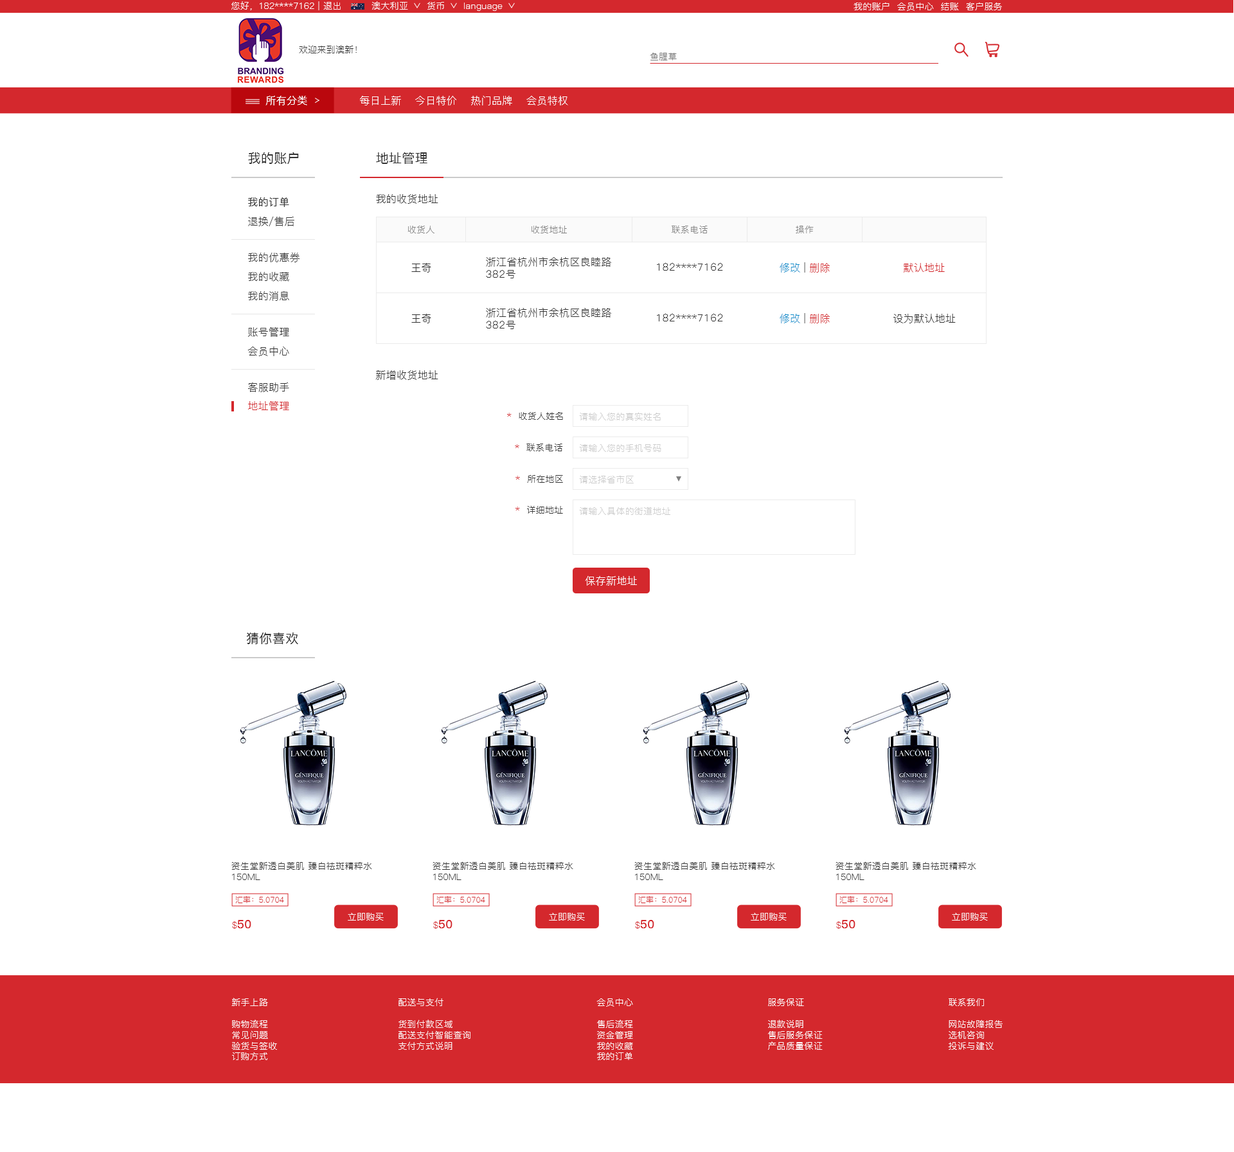
<style>
.page{position:relative;width:1234px;height:1152px;background:#ffffff}
.page>*{position:absolute;margin:0}
.t1{font:9px "PingFang-SC-Regular";letter-spacing:0.02em;color:#ffffff}
.t2{font:9px "PingFang-SC-Regular";letter-spacing:0.02em;color:#333333}
.t3{font:9px "PingFang-SC-Regular";letter-spacing:0.02em;color:#767676}
.t4{font:10.3px "PingFang-SC-Medium";letter-spacing:0.02em;color:#ffffff}
.t5{font:10.3px "PingFang-SC-Regular";letter-spacing:0.02em;color:#ffffff}
.t6{font:12.9px "PingFang-SC-Medium";letter-spacing:0.02em;color:#333333}
.t7{font:10.3px "PingFang-SC-Medium";letter-spacing:0.02em;color:#333333}
.t8{font:10.3px "PingFang-SC-Regular";letter-spacing:0.02em;color:#343434}
.t9{font:9px "PingFang-SC-Regular";letter-spacing:0.02em;color:#808080}
.t10{font:10.3px "PingFang-SC-Regular";letter-spacing:0.02em;color:#333333}
.t11{font:10.3px "PingFang-SC-Regular";letter-spacing:0.02em;color:#148fcc}
.t12{font:10.3px "PingFang-SC-Regular";letter-spacing:0.02em;color:#d4282d}
.t13{font:9px "PingFang-SC-Regular";letter-spacing:0.02em;color:#343434}
.t14{font:9px "PingFang-SC-Regular";letter-spacing:0.02em;color:#d4282d}
.t15{font:9px "PingFang-SC-Regular";letter-spacing:0.02em;color:#cccccc}
.t16{font:7.7px "PingFang-SC-Regular";letter-spacing:0.02em;color:#d4282d}
.t17{font:11.6px "PingFang-SC-Bold";letter-spacing:0.02em;color:#d4282d}
.t18{font:9px "PingFang-SC-Regular";letter-spacing:0.02em;color:#fffefe}
</style>
<div class="page">
<p class="t1" style="left:231px;top:1px;width:110px;height:9px">您好，182****7162 | 退出</p>
<p class="t1" style="left:372px;top:1px;width:36px;height:9px">澳大利亚</p>
<p class="t1" style="left:427px;top:2px;width:17px;height:8px">货币</p>
<p class="t1" style="left:464px;top:3px;width:39px;height:8px">language</p>
<p class="t1" style="left:854px;top:2px;width:148px;height:9px">我的账户  会员中心  结账  客户服务</p>
<p class="t2" style="left:299px;top:45px;width:58px;height:8px">欢迎来到澳新！</p>
<p class="t3" style="left:650px;top:53px;width:27px;height:7px">鱼腥草</p>
<p class="t4" style="left:266px;top:96px;width:41px;height:9px">所有分类</p>
<p class="t5" style="left:360px;top:96px;width:208px;height:9px">每日上新    今日特价    热门品牌    会员特权</p>
<p class="t6" style="left:248px;top:152px;width:51px;height:12px">我的账户</p>
<p class="t6" style="left:376px;top:152px;width:52px;height:12px">地址管理</p>
<p class="t7" style="left:248px;top:197px;width:41px;height:10px">我的订单</p>
<p class="t8" style="left:376px;top:194px;width:62px;height:10px">我的收货地址</p>
<p class="t8" style="left:248px;top:217px;width:46px;height:9px">退换/售后</p>
<p class="t9" style="left:408px;top:226px;width:27px;height:7px">收货人</p>
<p class="t9" style="left:531px;top:226px;width:36px;height:7px">收货地址</p>
<p class="t9" style="left:672px;top:226px;width:36px;height:7px">联系电话</p>
<p class="t9" style="left:796px;top:226px;width:18px;height:7px">操作</p>
<p class="t8" style="left:248px;top:253px;width:52px;height:9px">我的优惠券</p>
<p class="t10" style="left:486px;top:257px;width:125px;height:21px">浙江省杭州市余杭区良睦路<br>382号</p>
<p class="t10" style="left:411px;top:263px;width:20px;height:10px">王奇</p>
<p class="t10" style="left:657px;top:263px;width:66px;height:8px">182****7162</p>
<p class="t11" style="left:780px;top:262px;width:50px;height:11px">修改 <span class="t10">| </span><span class="t12">删除</span></p>
<p class="t12" style="left:904px;top:263px;width:41px;height:10px">默认地址</p>
<p class="t8" style="left:248px;top:272px;width:41px;height:10px">我的收藏</p>
<p class="t8" style="left:248px;top:291px;width:41px;height:10px">我的消息</p>
<p class="t10" style="left:411px;top:314px;width:20px;height:9px">王奇</p>
<p class="t10" style="left:486px;top:308px;width:125px;height:21px">浙江省杭州市余杭区良睦路<br>382号</p>
<p class="t10" style="left:657px;top:314px;width:66px;height:7px">182****7162</p>
<p class="t11" style="left:780px;top:313px;width:50px;height:10px">修改 <span class="t10">| </span><span class="t12">删除</span></p>
<p class="t10" style="left:894px;top:314px;width:62px;height:9px">设为默认地址</p>
<p class="t10" style="left:248px;top:327px;width:41px;height:10px">账号管理</p>
<p class="t8" style="left:248px;top:346px;width:41px;height:10px">会员中心</p>
<p class="t8" style="left:375px;top:370px;width:63px;height:10px">新增收货地址</p>
<p class="t8" style="left:248px;top:382px;width:41px;height:10px">客服助手</p>
<p class="t12" style="left:248px;top:401px;width:41px;height:10px">地址管理</p>
<p class="t13" style="left:507px;top:412px;width:56px;height:8px"><span class="t14">*</span>  收货人姓名</p>
<p class="t15" style="left:579px;top:412px;width:82px;height:8px">请输入您的真实姓名</p>
<p class="t13" style="left:515px;top:444px;width:48px;height:7px"><span class="t14">*</span>  联系电话</p>
<p class="t15" style="left:579px;top:444px;width:83px;height:8px">请输入您的手机号码</p>
<p class="t13" style="left:516px;top:475px;width:47px;height:8px"><span class="t14">*</span>  所在地区</p>
<p class="t15" style="left:579px;top:475px;width:55px;height:8px">请选择省市区</p>
<p class="t13" style="left:516px;top:506px;width:47px;height:8px"><span class="t14">*</span>  详细地址</p>
<p class="t15" style="left:579px;top:507px;width:91px;height:8px">请输入具体的街道地址</p>
<p class="t5" style="left:585px;top:576px;width:52px;height:10px">保存新地址</p>
<p class="t6" style="left:247px;top:632px;width:51px;height:12px">猜你喜欢</p>
<p class="t2" style="left:231px;top:861px;width:141px;height:19px">资生堂新透白美肌 臻白祛斑精粹水<br>150ML</p>
<p class="t2" style="left:433px;top:861px;width:140px;height:19px">资生堂新透白美肌 臻白祛斑精粹水<br>150ML</p>
<p class="t2" style="left:634px;top:861px;width:141px;height:19px">资生堂新透白美肌 臻白祛斑精粹水<br>150ML</p>
<p class="t2" style="left:836px;top:861px;width:141px;height:19px">资生堂新透白美肌 臻白祛斑精粹水<br>150ML</p>
<p class="t16" style="left:235px;top:896px;width:49px;height:7px">汇率：5.0704</p>
<p class="t16" style="left:437px;top:896px;width:48px;height:7px">汇率：5.0704</p>
<p class="t16" style="left:638px;top:896px;width:49px;height:7px">汇率：5.0704</p>
<p class="t16" style="left:840px;top:896px;width:48px;height:7px">汇率：5.0704</p>
<p class="t1" style="left:348px;top:913px;width:36px;height:8px">立即购买</p>
<p class="t1" style="left:549px;top:913px;width:36px;height:8px">立即购买</p>
<p class="t1" style="left:751px;top:913px;width:36px;height:8px">立即购买</p>
<p class="t1" style="left:952px;top:913px;width:36px;height:8px">立即购买</p>
<p class="t17" style="left:232px;top:920px;width:19px;height:9px"><span class="t14">$</span>50</p>
<p class="t17" style="left:433px;top:920px;width:20px;height:9px"><span class="t14">$</span>50</p>
<p class="t17" style="left:635px;top:920px;width:19px;height:9px"><span class="t14">$</span>50</p>
<p class="t17" style="left:836px;top:920px;width:20px;height:9px"><span class="t14">$</span>50</p>
<p class="t18" style="left:231px;top:998px;width:46px;height:62px">新手上路<br><br>购物流程<br>常见问题<br>验货与签收<br>订购方式</p>
<p class="t18" style="left:399px;top:998px;width:72px;height:52px">配送与支付<br><br>货到付款区域<br>配送支付智能查询<br>支付方式说明</p>
<p class="t18" style="left:597px;top:998px;width:36px;height:62px">会员中心<br><br>售后流程<br>资金管理<br>我的收藏<br>我的订单</p>
<p class="t18" style="left:768px;top:998px;width:55px;height:52px">服务保证<br><br>退款说明<br>售后服务保证<br>产品质量保证</p>
<p class="t18" style="left:948px;top:998px;width:55px;height:52px">联系我们<br><br>网站故障报告<br>选机咨询<br>投诉与建议</p>
</div>
